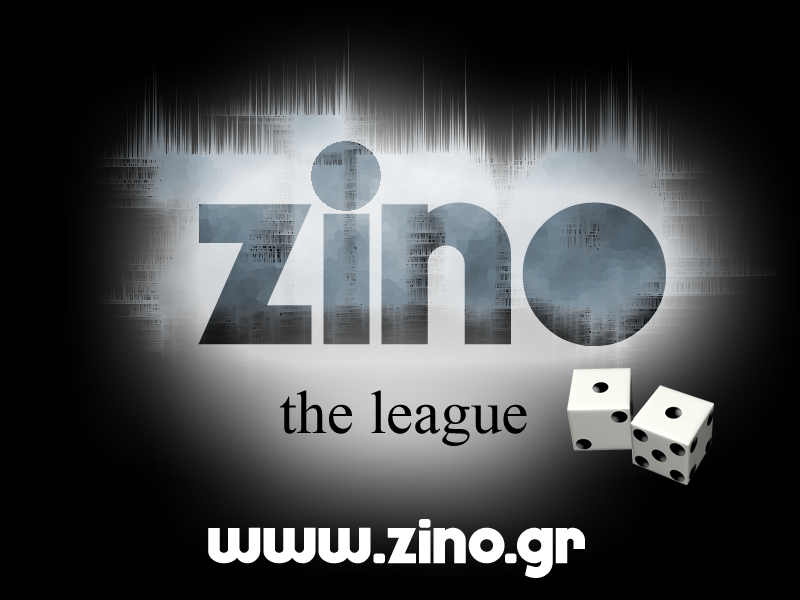
<style>
.page{position:relative;width:800px;height:600px;background:#000000}
.page>*{position:absolute;margin:0}
.t1{font:61.1px "TimesNewRomanPSMT";color:#000000}
.t2{font:61.1px "Dokyo";color:#ffffff}
</style>
<div class="page">
<p class="t1" style="left:280px;top:390px;width:247px;height:56px">the league</p>
<p class="t2" style="left:208px;top:519px;width:377px;height:59px">www.zino.gr</p>
</div>
